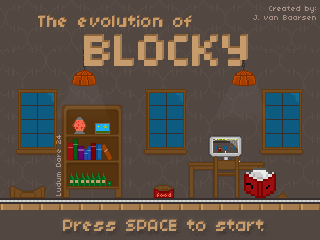
<style>
.page{position:relative;width:320px;height:240px;background:#534742}
.page>*{position:absolute;margin:0}
.t1{font:8px "04b03";color:#a58d83}
.t2{font:18px "04b03";color:#c69c6d}
.t3{font:18px "04b03"}
</style>
<div class="page">
<p class="t1" style="left:253px;top:6px;width:63px;height:14px;text-align:right">Created by:<br>J. van Baarsen</p>
<p class="t2" style="left:38px;top:16px;width:153px;height:11px">The evolution of</p>
<p class="t3" style="left:39px;top:15px;width:153px;height:11px">The evolution of</p>
<p class="t1" style="left:56px;top:135px;width:5px;height:61px;rotate:-90deg">Ludum Dare 24</p>
<p class="t2" style="left:63px;top:220px;width:200px;height:11px">Press SPACE to start</p>
<p class="t3" style="left:64px;top:219px;width:200px;height:11px">Press SPACE to start</p>
</div>
